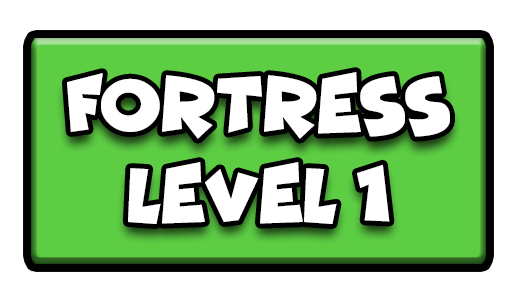
<style>
.page{position:relative;width:517px;height:301px;background:#ffffff}
.page>*{position:absolute;margin:0}
.t1{font:77.7px "Funhouse";color:#ffffff;scale:0.95 1}
</style>
<div class="page">
<p class="t1" style="left:67px;top:72px;width:383px;height:67px">FORTRESS</p>
<p class="t1" style="left:128px;top:162px;width:262px;height:62px">LEVEL 1</p>
</div>
